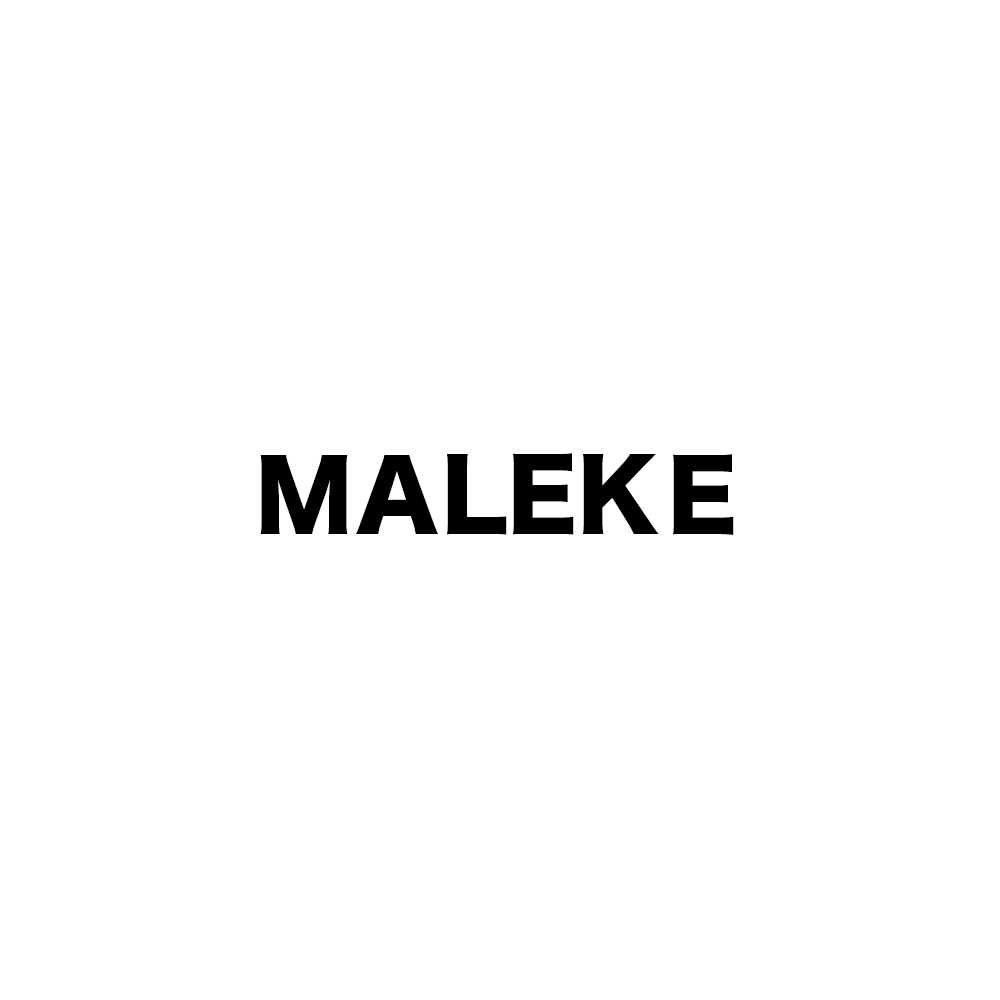
<style>
.page{position:relative;width:1000px;height:1000px;background:#ffffff}
.page>*{position:absolute;margin:0}
.t1{font:96px "HiraKakuStdN-W8";color:#000000;text-transform:uppercase}
.t2{font:96px "HiraKakuStdN-W8";color:#000000}
</style>
<div class="page">
<p class="t1" style="left:260px;top:453px;width:474px;height:82px"><span class="t2">MA</span>LEK<span class="t2">E</span></p>
</div>
